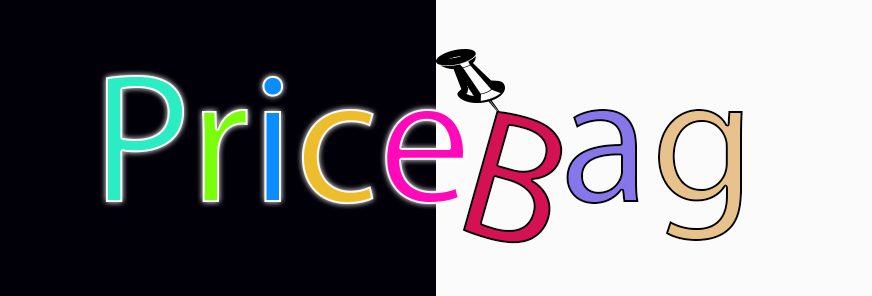
<style>
.page{position:relative;width:872px;height:296px;background:#fcfbfb}
.page>*{position:absolute;margin:0}
.t1{font:187.5px "MyriadPro-Regular";color:#2bedc3}
.t2{font:187.5px "MyriadPro-Regular";color:#7aff0b}
.t3{font:187.5px "MyriadPro-Regular";color:#0a8dff}
.t4{font:187.5px "MyriadPro-Regular";color:#edbd2c}
.t5{font:187.5px "MyriadPro-Regular";color:#ff0aba}
.t6{font:187.5px "MyriadPro-Regular";color:#d41152}
.t7{font:187.5px "MyriadPro-Regular";color:#8776e9}
.t8{font:187.5px "MyriadPro-Regular";color:#e7c28d}
</style>
<div class="page">
<p class="t1" style="left:106px;top:75px;width:359px;height:130px">P<span class="t2">r</span><span class="t3">i</span><span class="t4">c</span><span class="t5">e</span></p>
<p class="t6" style="left:462px;top:110px;width:101px;height:134px;rotate:16deg">B</p>
<p class="t7" style="left:566px;top:109px;width:177px;height:132px">a<span class="t8">g</span></p>
</div>
